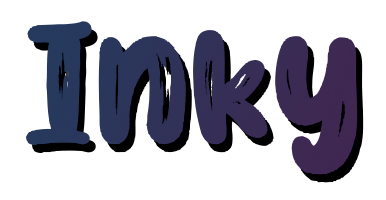
<style>
.page{position:relative;width:386px;height:200px;background:#ffffff}
.page>*{position:absolute;margin:0}
.t1{font:150px "Low-Budget";color:#333057}
</style>
<div class="page">
<p class="t1" style="left:26px;top:21px;width:332px;height:154px">Inky</p>
</div>
